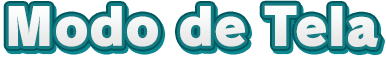
<style>
.page{position:relative;width:386px;height:66px;background:#ffffff}
.page>*{position:absolute;margin:0}
.t1{font:51.7px "RodinPro-UB";color:#f0f1f1}
</style>
<div class="page">
<p class="t1" style="left:8px;top:5px;width:370px;height:42px">Modo de Tela</p>
</div>
